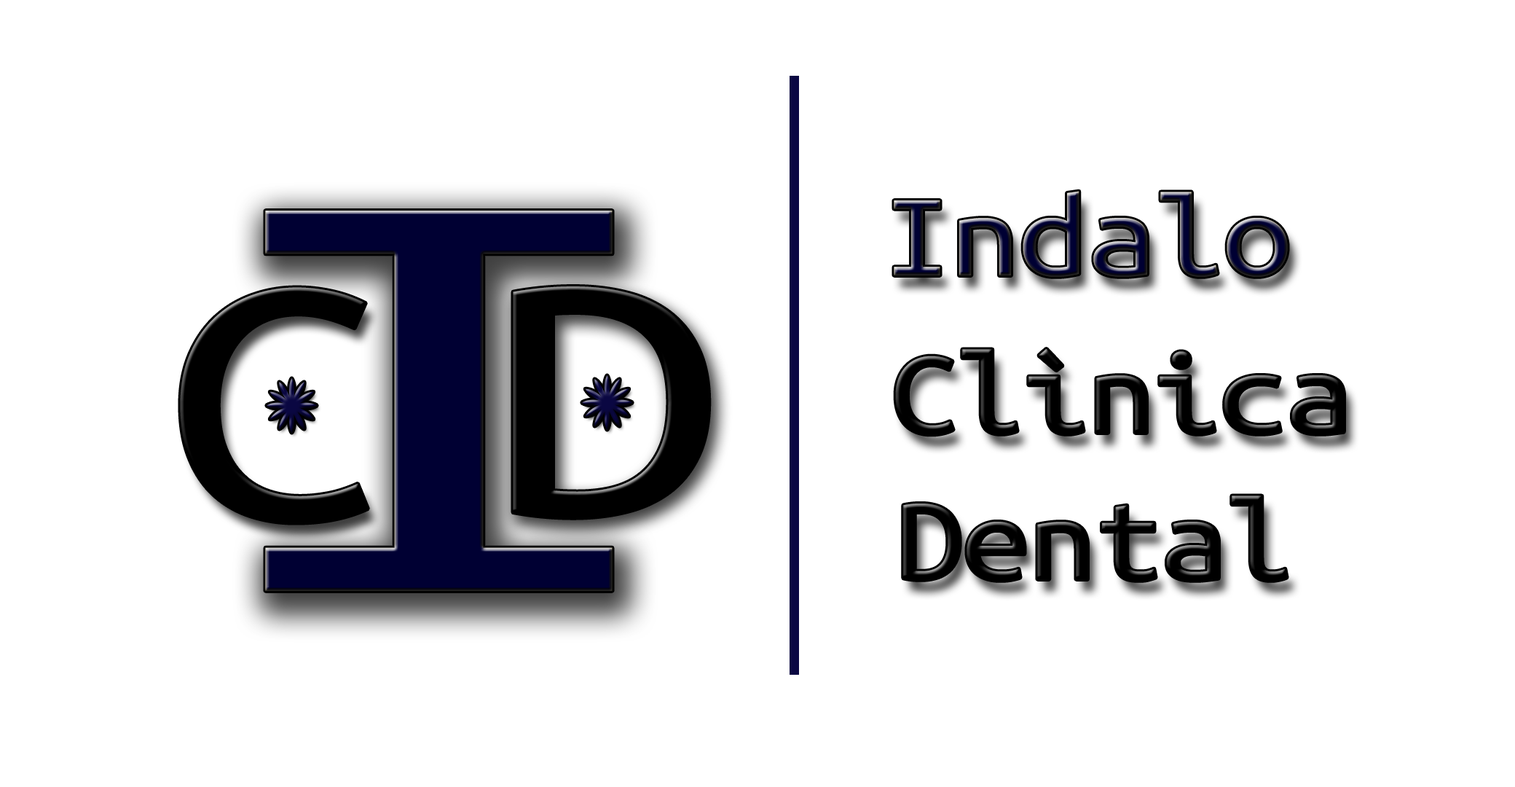
<style>
.page{position:relative;width:1515px;height:787px;background:#ffffff}
.page>*{position:absolute;margin:0}
.t1{font:121.1px "UbuntuMono-Regular";letter-spacing:-0.025em;scale:1.18 1}
.t2{font:614.3px "UbuntuMono-Regular";letter-spacing:-0.025em;color:#000033;scale:1.75 1}
.t3{font:364.1px "UbuntuMono-Regular";letter-spacing:-0.025em;color:#000000;scale:1.24 1}
.t4{font:367px "UbuntuMono-Regular";letter-spacing:-0.025em;color:#000000;scale:1.31 1}
.t5{font:121.1px "UbuntuMono-Regular";letter-spacing:-0.025em;color:#000000;scale:1.14 1}
</style>
<div class="page">
<p class="t1" style="left:894px;top:191px;width:394px;height:86px">Indalo</p>
<p class="t2" style="left:265px;top:211px;width:348px;height:380px">I</p>
<p class="t3" style="left:180px;top:287px;width:188px;height:236px">C</p>
<p class="t4" style="left:513px;top:286px;width:197px;height:232px">D</p>
<p class="t5" style="left:895px;top:349px;width:449px;height:86px">Clìnica</p>
<p class="t5" style="left:903px;top:495px;width:384px;height:86px">Dental</p>
</div>
